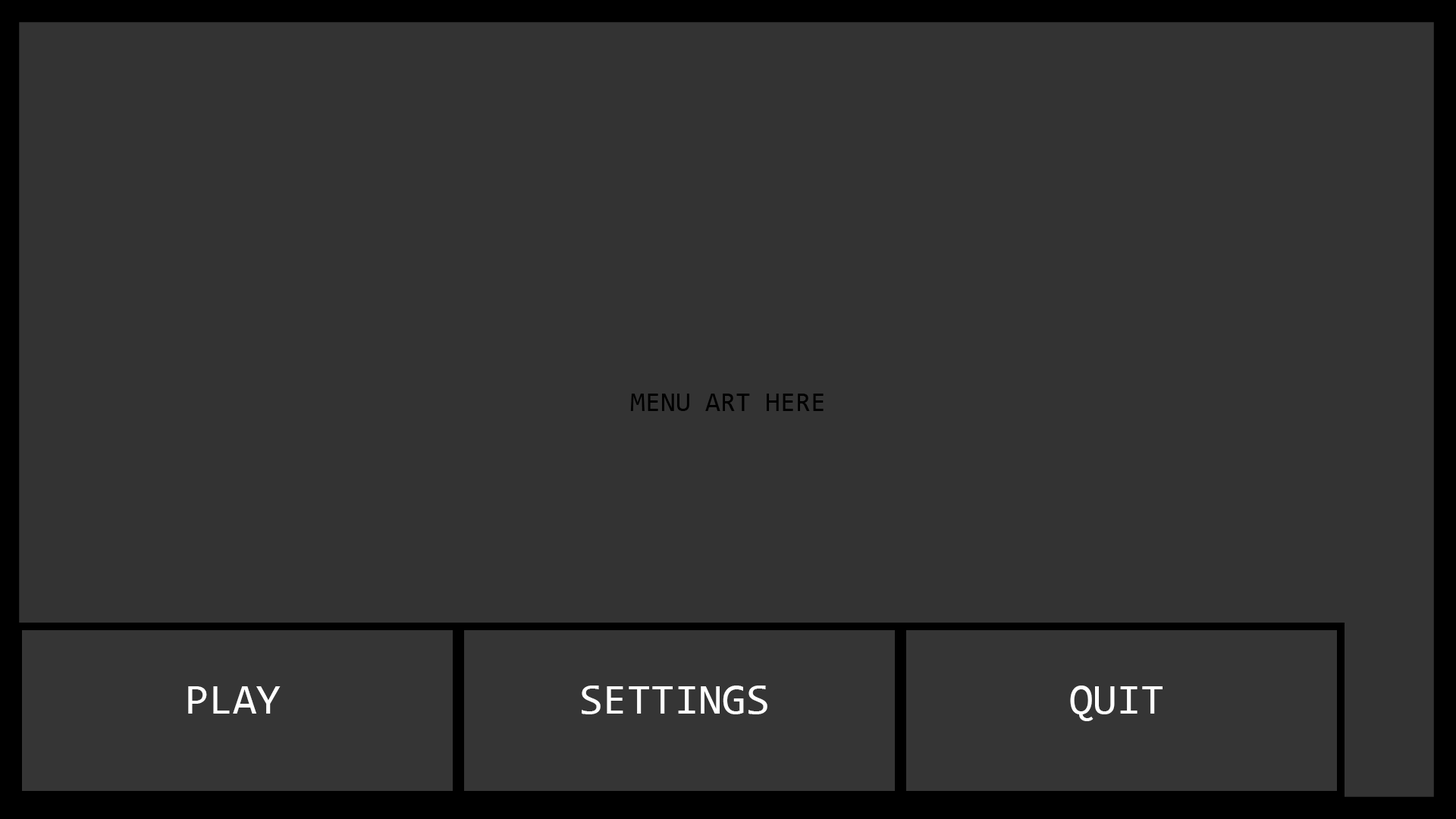
<style>
.page{position:relative;width:1456px;height:819px;background:#333333}
.page>*{position:absolute;margin:0}
.t1{font:27.3px "Consolas";color:#000000;text-transform:uppercase}
.t2{font:43.2px "Consolas";color:#ffffff;text-transform:uppercase}
</style>
<div class="page">
<p class="t1" style="left:630px;top:394px;width:194px;height:17px">MEnu Art Here</p>
<p class="t2" style="left:188px;top:686px;width:93px;height:28px">Play</p>
<p class="t2" style="left:582px;top:686px;width:185px;height:28px">Settings</p>
<p class="t2" style="left:1070px;top:686px;width:93px;height:35px">Quit</p>
</div>
